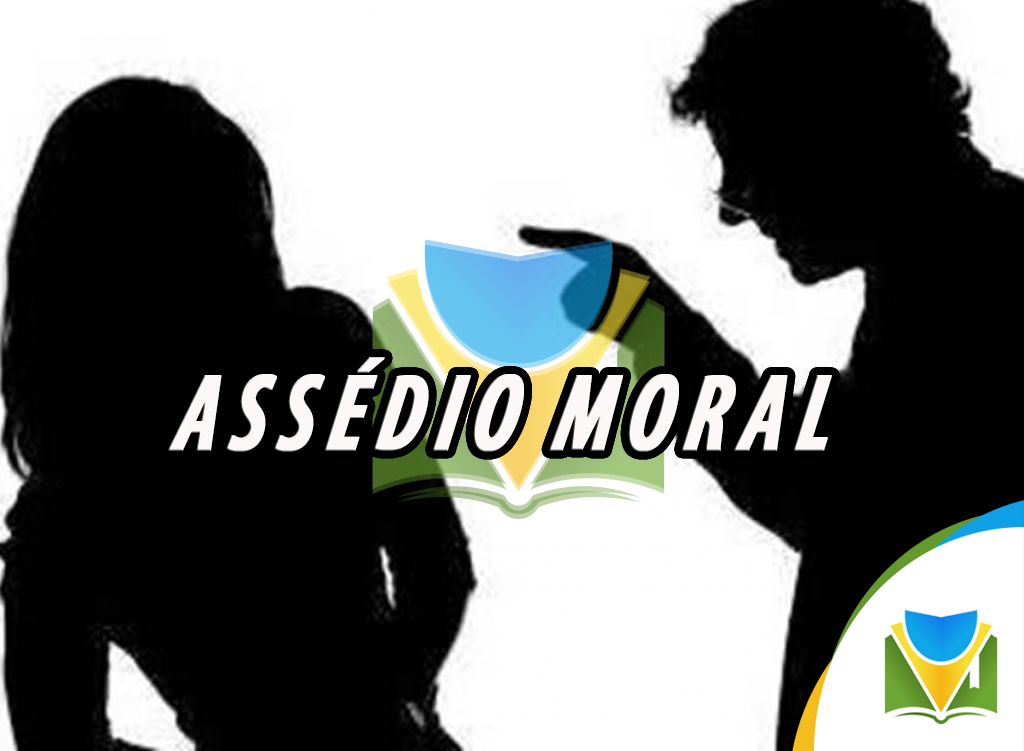
<style>
.page{position:relative;width:1024px;height:751px;background:#010101}
.page>*{position:absolute;margin:0}
.t1{font:109.6px "MyriadPro-BoldCondIt";letter-spacing:0.1em;color:#fdf8f8;text-transform:uppercase;font-weight:bold;font-style:italic;scale:0.84 1}
</style>
<div class="page">
<p class="t1" style="left:168px;top:357px;width:664px;height:95px">assédio moral</p>
<p class="t1" style="left:168px;top:357px;width:664px;height:95px">assédio moral</p>
</div>
